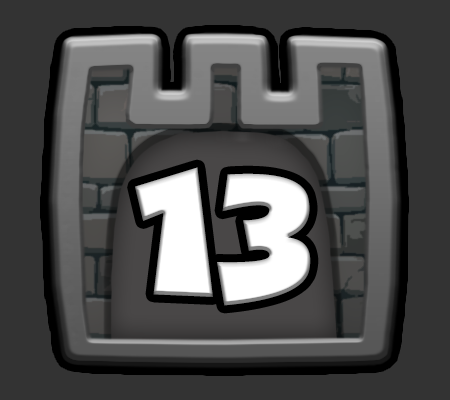
<style>
.page{position:relative;width:450px;height:400px;background:#333333}
.page>*{position:absolute;margin:0}
.t1{font:177px "Funhouse";color:#ffffff}
</style>
<div class="page">
<p class="t1" style="left:135px;top:167px;width:176px;height:139px">13</p>
</div>
